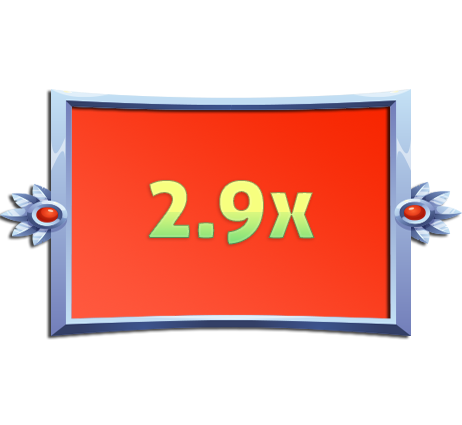
<style>
.page{position:relative;width:462px;height:425px;background:#ffffff}
.page>*{position:absolute;margin:0}
.t1{font:87.8px "AllerDisplay"}
</style>
<div class="page">
<p class="t1" style="left:148px;top:180px;width:167px;height:65px">2.9x</p>
</div>
